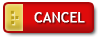
<style>
.page{position:relative;width:100px;height:40px}
.page>*{position:absolute;margin:0}
.t1{font:14px "TrebuchetMS";color:#ffffff;font-weight:bold}
</style>
<div class="page">
<p class="t1" style="left:34px;top:12px;width:51px;height:11px">CANCEL</p>
</div>
